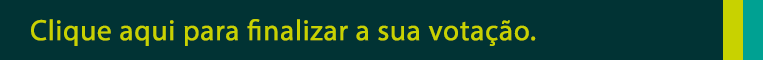
<style>
.page{position:relative;width:763px;height:60px;background:#013334}
.page>*{position:absolute;margin:0}
.t1{font:29.2px "MyriadPro-Regular";color:#c8d200;font-weight:bold}
</style>
<div class="page">
<p class="t1" style="left:31px;top:19px;width:505px;height:27px">Clique aqui para finalizar a sua votação.</p>
</div>
